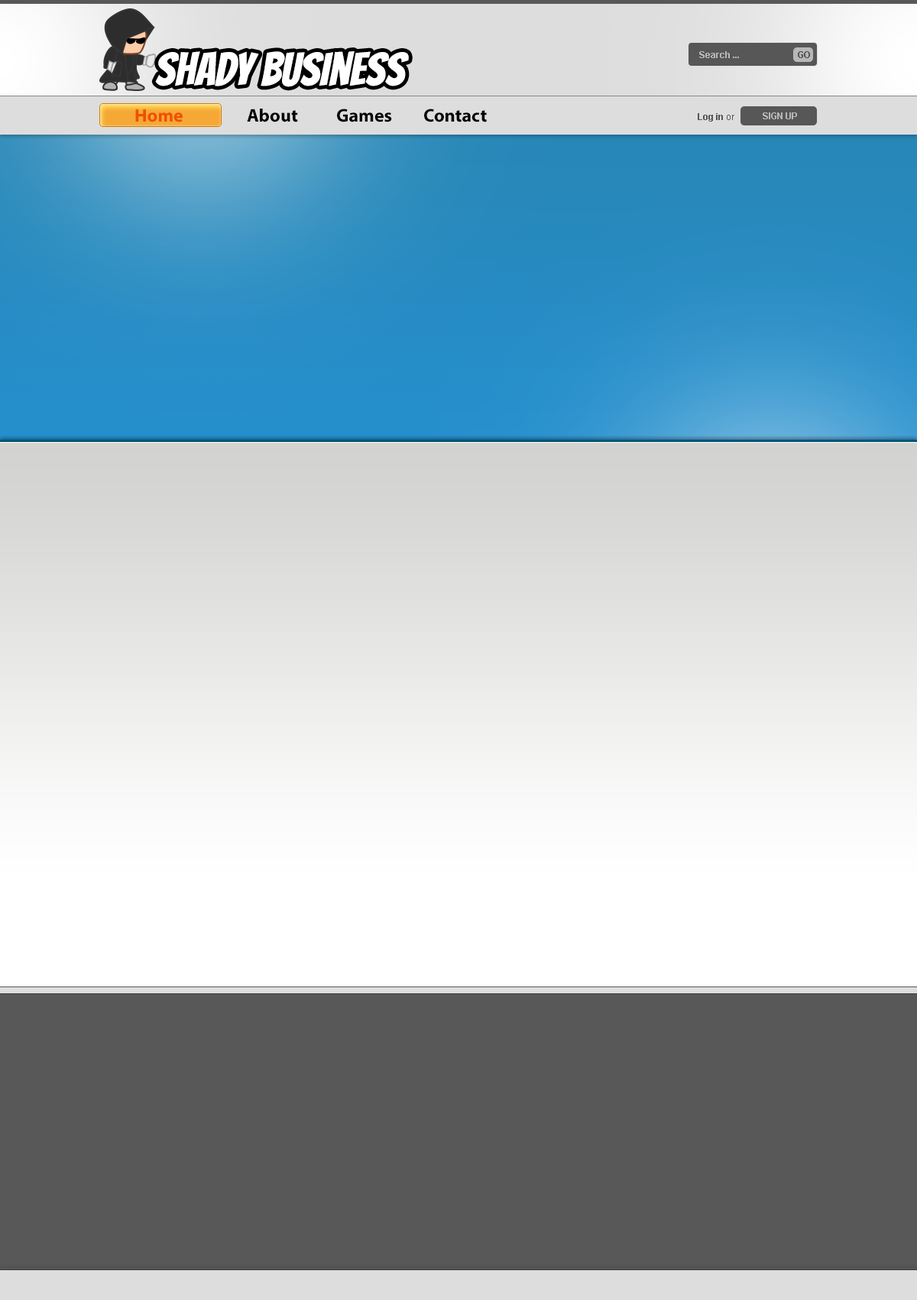
<style>
.page{position:relative;width:917px;height:1300px;background:#585858}
.page>*{position:absolute;margin:0}
.t1{font:9.2px "Arial-BoldMT";color:#b7b7b7}
.t2{font:9.2px "Arial-BoldMT";color:#575757}
.t3{font:18.3px "MyriadPro-Bold";color:#ed5100}
.t4{font:18.3px "MyriadPro-Bold";color:#000000}
.t5{font:9.2px "ArialMT";color:#575757}
</style>
<div class="page">
<p class="t1" style="left:700px;top:51px;width:39px;height:7px">Search ...</p>
<p class="t2" style="left:798px;top:51px;width:12px;height:7px">GO</p>
<p class="t3" style="left:135px;top:109px;width:48px;height:13px">Home</p>
<p class="t4" style="left:247px;top:109px;width:51px;height:13px">About</p>
<p class="t4" style="left:337px;top:109px;width:55px;height:13px">Games</p>
<p class="t4" style="left:424px;top:109px;width:63px;height:13px">Contact</p>
<p class="t2" style="left:698px;top:113px;width:37px;height:9px">Log in <span class="t5">or</span></p>
<p class="t1" style="left:763px;top:112px;width:34px;height:7px">SIGN UP</p>
</div>
